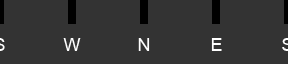
<style>
.page{position:relative;width:288px;height:64px;background:#333333}
.page>*{position:absolute;margin:0}
.t1{font:18px "ArialMT";color:#ffffff}
</style>
<div class="page">
<p class="t1" style="left:63px;top:38px;width:18px;height:13px">W</p>
<p class="t1" style="left:138px;top:38px;width:12px;height:13px">N</p>
<p class="t1" style="left:211px;top:38px;width:11px;height:13px">E</p>
</div>
